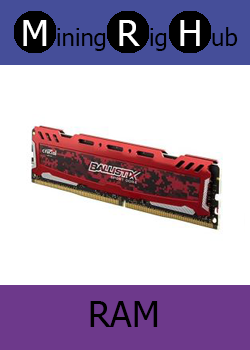
<style>
.page{position:relative;width:250px;height:350px;background:#ffffff}
.page>*{position:absolute;margin:0}
.t1{font:36px "Tahoma";color:#ffffff}
.t2{font:24px "Tahoma";color:#000000}
.t3{font:36px "Tahoma";color:#000000}
</style>
<div class="page">
<p class="t1" style="left:23px;top:20px;width:24px;height:26px">M</p>
<p class="t2" style="left:57px;top:28px;width:49px;height:23px">ining</p>
<p class="t1" style="left:119px;top:20px;width:21px;height:26px">R</p>
<p class="t2" style="left:150px;top:28px;width:17px;height:23px">ig</p>
<p class="t1" style="left:180px;top:20px;width:20px;height:26px">H</p>
<p class="t2" style="left:212px;top:27px;width:26px;height:19px">ub</p>
<p class="t3" style="left:90px;top:301px;width:68px;height:26px">RAM</p>
</div>
